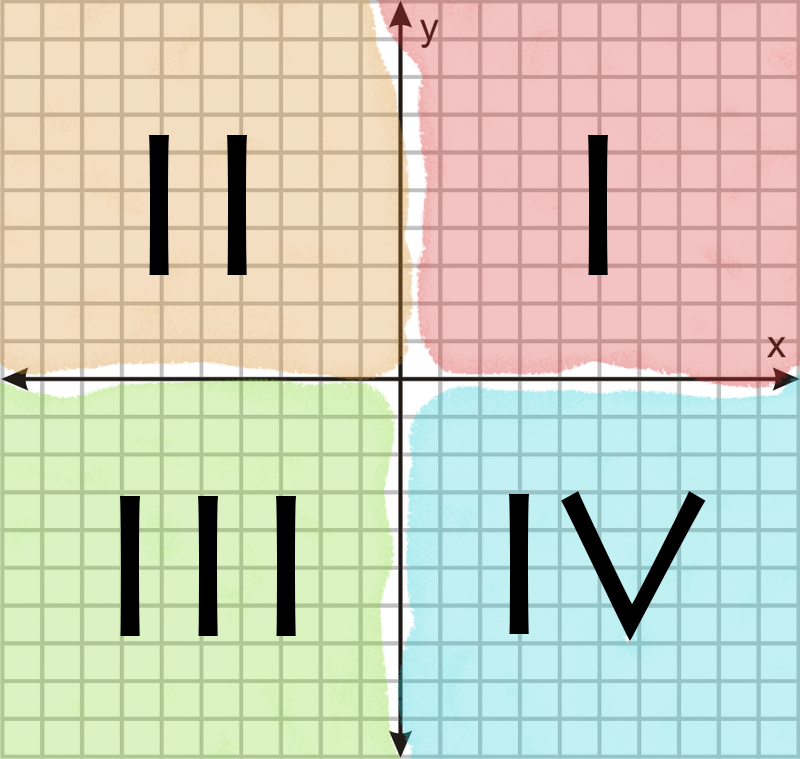
<style>
.page{position:relative;width:800px;height:759px}
.page>*{position:absolute;margin:0}
.t1{font:200px "LithosPro-Regular";color:#000000}
.t2{font:200px "LithosPro-Regular";color:#010101}
</style>
<div class="page">
<p class="t1" style="left:149px;top:135px;width:98px;height:140px">II</p>
<p class="t2" style="left:588px;top:135px;width:20px;height:140px">I</p>
<p class="t1" style="left:120px;top:496px;width:176px;height:140px">III</p>
<p class="t1" style="left:509px;top:491px;width:197px;height:150px">IV</p>
</div>
